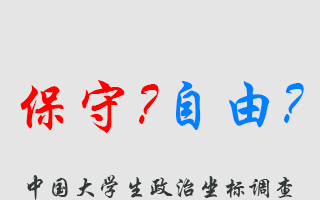
<style>
.page{position:relative;width:320px;height:200px;background:#e5e5e5}
.page>*{position:absolute;margin:0}
.t1{font:60px "STXingkai-SC-Bold";color:#ff0000}
.t2{font:60px "STXingkai-SC-Bold";color:#007fff}
.t3{font:25px "STXingkai-SC-Bold";color:#323935}
</style>
<div class="page">
<p class="t1" style="left:20px;top:80px;width:139px;height:53px">保守？</p>
<p class="t2" style="left:176px;top:81px;width:128px;height:49px">自由？</p>
<p class="t3" style="left:26px;top:175px;width:267px;height:25px">中国大学生政治坐标调查</p>
</div>
